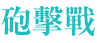
<style>
.page{position:relative;width:97px;height:43px;background:#ffffff}
.page>*{position:absolute;margin:0}
.t1{font:32px "RyuminPr6N-ExBold";color:#1dbdc0}
</style>
<div class="page">
<p class="t1" style="left:1px;top:6px;width:94px;height:30px">砲擊戰</p>
</div>
